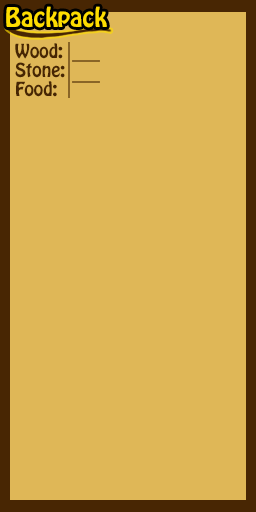
<style>
.page{position:relative;width:256px;height:512px;background:#dfb757}
.page>*{position:absolute;margin:0}
.t1{font:24px "HoboStd";color:#fedd00}
.t2{font:17.1px "HoboStd";color:#472603}
</style>
<div class="page">
<p class="t1" style="left:6px;top:6px;width:101px;height:22px">Backpack</p>
<p class="t2" style="left:15px;top:43px;width:48px;height:16px">Wood:</p>
<p class="t2" style="left:15px;top:62px;width:50px;height:16px">Stone:</p>
<p class="t2" style="left:16px;top:81px;width:41px;height:16px">Food:</p>
</div>
